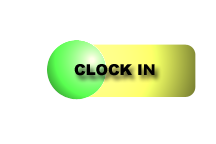
<style>
.page{position:relative;width:216px;height:144px;background:#ffffff}
.page>*{position:absolute;margin:0}
.t1{font:15px "Arial-Black";color:#000000}
</style>
<div class="page">
<p class="t1" style="left:74px;top:64px;width:81px;height:12px">CLOCK IN</p>
</div>
